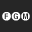
<style>
.page{position:relative;width:32px;height:32px;background:#262626}
.page>*{position:absolute;margin:0}
.t1{font:9.6px "PiOneFiveFiveZero";letter-spacing:-0.01em;color:#ffffff}
</style>
<div class="page">
<p class="t1" style="left:2px;top:12px;width:28px;height:9px">FGM</p>
</div>
